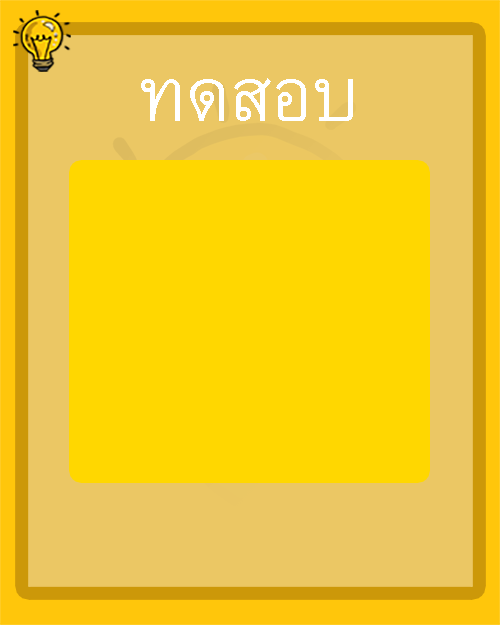
<style>
.page{position:relative;width:500px;height:625px;background:#ffd700}
.page>*{position:absolute;margin:0}
.t1{font:104.2px "BrowalliaNew";color:#ffffff}
</style>
<div class="page">
<p class="t1" style="left:141px;top:78px;width:212px;height:43px">ทดสอบ</p>
</div>
